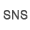
<style>
.page{position:relative;width:30px;height:30px;background:#ffffff}
.page>*{position:absolute;margin:0}
.t1{font:11.9px "Gulim";color:#525252;font-weight:bold}
</style>
<div class="page">
<p class="t1" style="left:3px;top:10px;width:25px;height:10px">SNS</p>
</div>
